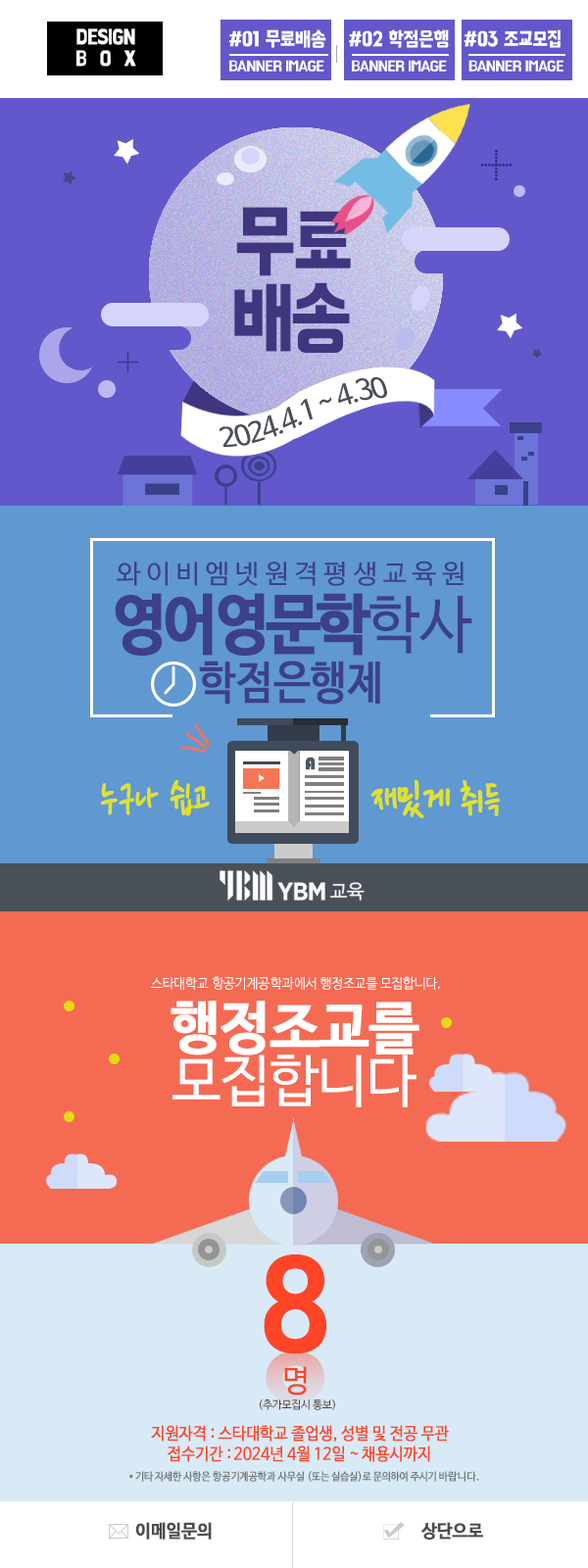
<style>
.page{position:relative;width:588px;height:1568px}
.page>*{position:absolute;margin:0}
.t1{font:21.2px "BMHANNAPro";letter-spacing:-0.025em;color:#ffffff;font-weight:bold;scale:0.79 1}
.t2{font:21.2px/21.2px "BMHANNAPro";letter-spacing:0.775em;color:#ffffff;font-weight:bold;scale:0.79 1}
.t3{font:20.7px "BMHANNAPro";letter-spacing:-0.025em;color:#ffffff;font-weight:bold;scale:0.85 1}
.t4{font:14.9px "BMHANNAPro";letter-spacing:-0.05em;color:#ffffff;scale:0.95 1}
.t5{font:15px "BMHANNAPro";letter-spacing:-0.05em;color:#ffffff;scale:0.95 1}
.t6{font:80.5px "BMHANNAPro";letter-spacing:-0.05em;color:#40367f;font-weight:bold;scale:0.87 1}
.t7{font:80.5px "BMHANNAPro";letter-spacing:-0.07em;color:#40367f;font-weight:bold;scale:0.87 1}
.t8{font:27.8px "NanumBarunGothic";letter-spacing:-0.07em;color:#495058}
.t9{font:26.1px "NanumBarunGothic";letter-spacing:0.21em;color:#3c408a}
.t10{font:65.5px "NanumBarunGothicBold";color:#3c408a;font-weight:bold;scale:0.92 1}
.t11{font:62.4px "NanumBarunGothic";color:#3c408a;scale:0.92 1}
.t12{font:45.3px "NanumBarunGothic";color:#3c408a;font-weight:bold;scale:0.89 1}
.t13{font:17.6px "Bauhaus93";letter-spacing:-0.025em;color:#4d5763;font-weight:bold}
.t14{font:46.6px "NanumPen";color:#e0e12e;font-weight:bold;scale:0.8 1}
.t15{font:46.6px "NanumPen";color:#e0e12e;font-weight:bold;scale:0.85 1}
.t16{font:13.9px "NanumBarunGothic";letter-spacing:-0.025em;color:#ffffff;scale:0.95 1}
.t17{font:13.9px "NanumBarunGothic";color:#ffffff;scale:0.95 1}
.t18{font:57.2px "NanumBarunGothicBold";letter-spacing:-0.025em;color:#ffffff;font-weight:bold}
.t19{font:57.2px "NanumBarunGothic";letter-spacing:-0.025em;color:#ffffff}
.t20{font:121px "NanumBarunGothicBold";letter-spacing:-0.025em;color:#fe4527;font-weight:bold;scale:0.93 1}
.t21{font:30.4px "NanumBarunGothic";letter-spacing:-0.025em;color:#fe4527}
.t22{font:11.3px "NanumBarunGothic";letter-spacing:-0.025em;color:#563d41}
.t23{font:16.8px "NanumBarunGothic";letter-spacing:-0.025em;color:#fe4527;font-weight:bold;scale:0.92 1}
.t24{font:10.7px "NanumBarunGothic";letter-spacing:-0.025em;color:#72777a;font-weight:bold;scale:0.91 1}
.t25{font:20.6px "NanumBarunGothic";letter-spacing:-0.025em;color:#72777a;font-weight:bold;scale:0.91 1}
.t26{font:10.7px "NanumBarunGothic";letter-spacing:-0.005em;color:#72777a;font-weight:bold;scale:0.91 1}
.t27{font:10.7px "NanumBarunGothic";letter-spacing:0.035em;color:#72777a;font-weight:bold;scale:0.91 1}
.t28{font:18.2px "NanumBarunGothicBold";letter-spacing:-0.025em;color:#4d4d4d;font-weight:bold;scale:0.94 1}
</style>
<div class="page">
<p class="t1" style="left:76px;top:28px;width:60px;height:39px;text-align:center">DESIGN<br><span class="t2">BOX</span></p>
<p class="t3" style="left:229px;top:29px;width:97px;height:19px">#01 무료배송</p>
<p class="t3" style="left:229px;top:29px;width:97px;height:19px">#01 무료배송</p>
<p class="t3" style="left:349px;top:29px;width:100px;height:19px">#02 학점은행</p>
<p class="t3" style="left:349px;top:29px;width:100px;height:19px">#02 학점은행</p>
<p class="t3" style="left:464px;top:29px;width:97px;height:19px">#03 조교모집</p>
<p class="t3" style="left:464px;top:29px;width:97px;height:19px">#03 조교모집</p>
<p class="t4" style="left:229px;top:60px;width:95px;height:12px">BANNER IMAGE</p>
<p class="t4" style="left:229px;top:60px;width:95px;height:12px">BANNER IMAGE</p>
<p class="t5" style="left:352px;top:60px;width:95px;height:12px">BANNER IMAGE</p>
<p class="t5" style="left:352px;top:60px;width:95px;height:12px">BANNER IMAGE</p>
<p class="t4" style="left:468px;top:60px;width:96px;height:12px">BANNER IMAGE</p>
<p class="t4" style="left:468px;top:60px;width:96px;height:12px">BANNER IMAGE</p>
<p class="t6" style="left:234px;top:207px;width:117px;height:146px">무료<br><span class="t7">배송</span></p>
<p class="t8" style="left:219px;top:376px;width:168px;height:72px;rotate:-17deg">2024.4.1 ~ 4.30</p>
<p class="t9" style="left:117px;top:561px;width:347px;height:25px">와이비엠넷원격평생교육원</p>
<p class="t10" style="left:115px;top:593px;width:357px;height:63px">영어영문학<span class="t11">학사</span></p>
<p class="t12" style="left:199px;top:661px;width:181px;height:44px">학점은행제</p>
<p class="t13" style="left:306px;top:757px;width:10px;height:13px">A</p>
<p class="t14" style="left:101px;top:780px;width:109px;height:36px">누구나 쉽고</p>
<p class="t15" style="left:370px;top:780px;width:130px;height:38px">재밌게 취득</p>
<p class="t16" style="left:151px;top:976px;width:289px;height:14px">스타대학교 항공기계공학과에서 행정조교를 모집합니다<span class="t17">.</span></p>
<p class="t18" style="left:171px;top:1001px;width:248px;height:106px">행정조교를<br><span class="t19">모집합니다</span></p>
<p class="t20" style="left:264px;top:1254px;width:62px;height:100px">8</p>
<p class="t21" style="left:284px;top:1366px;width:23px;height:30px">명</p>
<p class="t22" style="left:260px;top:1399px;width:75px;height:11px">(추가모집시 통보)</p>
<p class="t23" style="left:151px;top:1425px;width:298px;height:37px;text-align:center">지원자격 : 스타대학교 졸업생, 성별 및 전공 무관<br>접수기간 : 2024년 4월 12일 ~ 채용시까지</p>
<p class="t24" style="left:129px;top:1471px;width:350px;height:11px"><span class="t25">·</span>기타 자세한 <span class="t26">사항은 항공기계공학과 사무실 </span>(또는 실습실)로 문의하여 주시기 <span class="t27">바랍니다.</span></p>
<p class="t28" style="left:135px;top:1522px;width:77px;height:18px">이메일문의</p>
<p class="t28" style="left:421px;top:1522px;width:62px;height:18px">상단으로</p>
</div>
